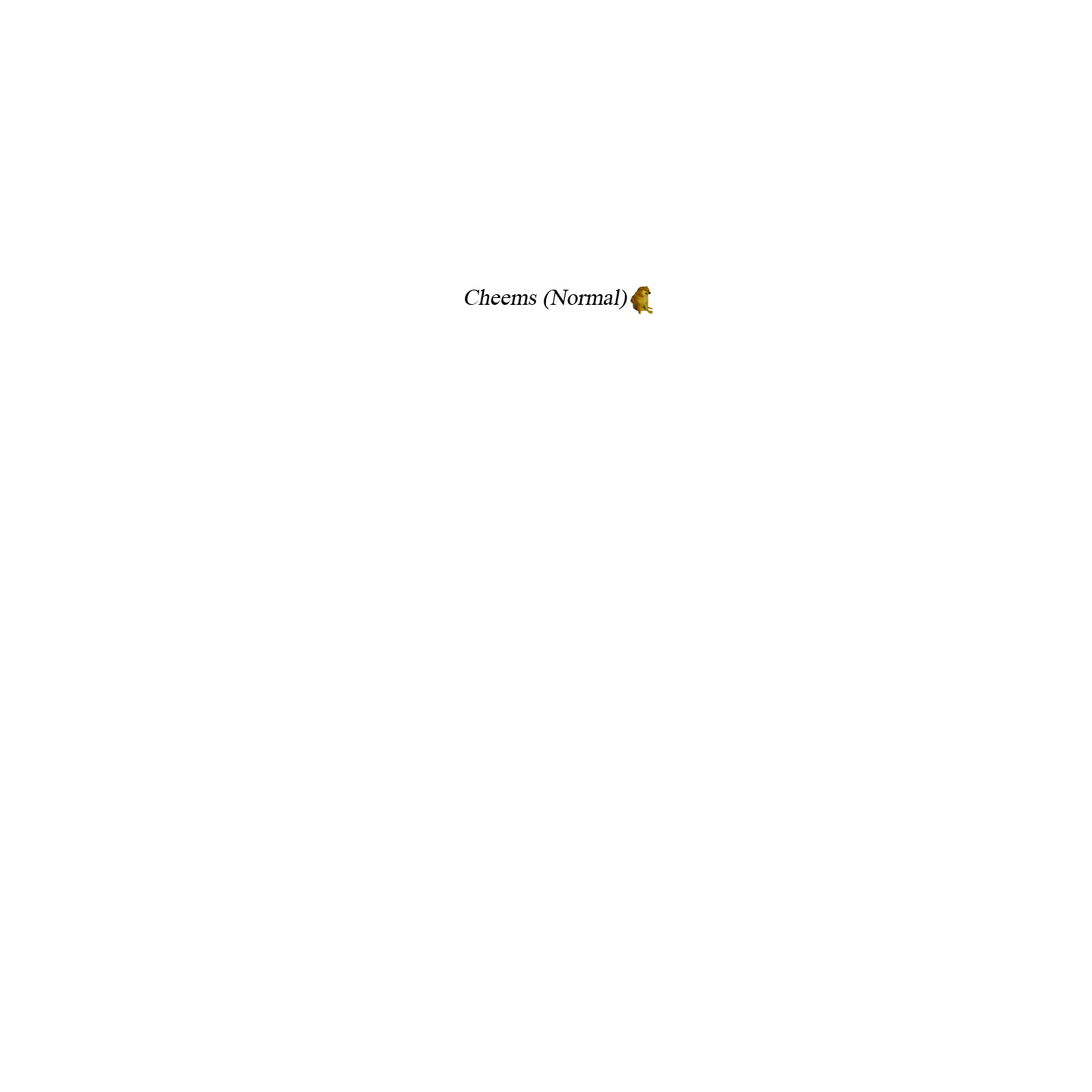
<style>
.page{position:relative;width:1092px;height:1092px;background:#ffffff}
.page>*{position:absolute;margin:0}
.t1{font:22.7px "TimesNewRomanPSMT";color:#040404;font-style:italic}
</style>
<div class="page">
<p class="t1" style="left:465px;top:289px;width:162px;height:20px">Cheems (Normal)</p>
</div>
